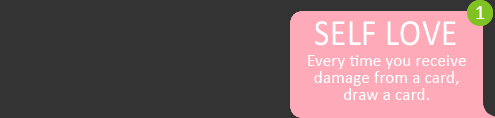
<style>
.page{position:relative;width:495px;height:118px;background:#333333}
.page>*{position:absolute;margin:0}
.t1{font:20.8px "Calibri";letter-spacing:0.02em;color:#ffffff}
.t2{font:37.3px "Calibri";letter-spacing:0.02em;color:#ffffff;scale:0.89 1}
.t3{font:16.7px/16.7px "Calibri";letter-spacing:0.02em;color:#ffffff}
</style>
<div class="page">
<p class="t1" style="left:476px;top:6px;width:9px;height:13px">1</p>
<p class="t1" style="left:476px;top:6px;width:9px;height:13px">1</p>
<p class="t2" style="left:315px;top:21px;width:141px;height:25px">SELF LOVE</p>
<p class="t3" style="left:308px;top:55px;width:158px;height:45px;text-align:center">Every time you receive<br>damage from a card,<br>draw a card.</p>
</div>
